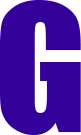
<style>
.page{position:relative;width:81px;height:135px;background:#330099}
.page>*{position:absolute;margin:0}
.t1{font:164px "Impact";color:#330099}
</style>
<div class="page">
<p class="t1" style="left:0px;top:0px;width:81px;height:135px">G</p>
</div>
